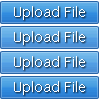
<style>
.page{position:relative;width:99px;height:100px}
.page>*{position:absolute;margin:0}
.t1{font:14px "LucidaSans";color:#ffffff}
</style>
<div class="page">
<p class="t1" style="left:13px;top:5px;width:73px;height:15px">Upload File</p>
<p class="t1" style="left:13px;top:30px;width:73px;height:15px">Upload File</p>
<p class="t1" style="left:13px;top:55px;width:73px;height:15px">Upload File</p>
<p class="t1" style="left:13px;top:80px;width:73px;height:15px">Upload File</p>
</div>
